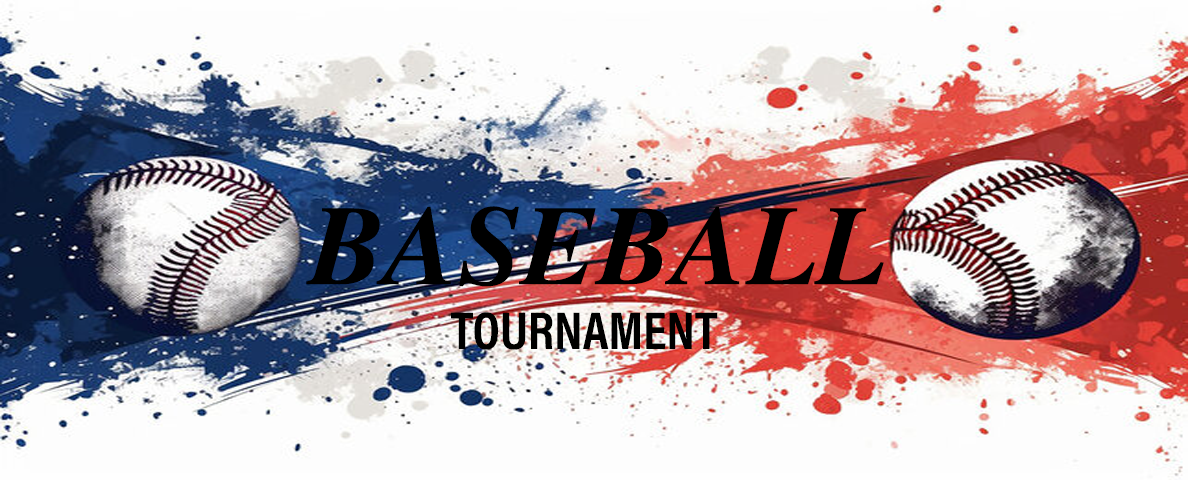
<style>
.page{position:relative;width:1188px;height:480px;background:#fdfdfd}
.page>*{position:absolute;margin:0}
.t1{font:112.8px "Times-BoldItalic";color:#000000}
.t2{font:53.5px "AcuminConcept-CondensedBold";color:#000000}
</style>
<div class="page">
<p class="t1" style="left:306px;top:206px;width:578px;height:81px">BASEBALL</p>
<p class="t2" style="left:451px;top:312px;width:267px;height:38px">TOURNAMENT</p>
</div>
